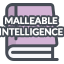
<style>
.page{position:relative;width:64px;height:64px;background:#ffffff}
.page>*{position:absolute;margin:0}
.t1{font:9.3px "Lato-Bold";color:#ffffff}
</style>
<div class="page">
<p class="t1" style="left:0px;top:17px;width:63px;height:19px;text-align:center">MALLEABLE<br>INTELLIGENCE</p>
</div>
